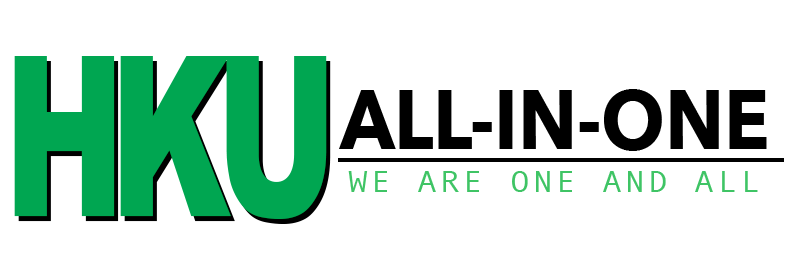
<style>
.page{position:relative;width:797px;height:271px;background:#ffffff}
.page>*{position:absolute;margin:0}
.t1{font:222.6px "Arial-Black";letter-spacing:-0.1em;color:#00a651;scale:0.65 1}
.t2{font:83px "AvenirNext-Bold";color:#000000;text-transform:uppercase;scale:0.9 1}
.t3{font:30px "AndaleMono";letter-spacing:0.1em;color:#3fc465;text-transform:uppercase;scale:1.1 1}
</style>
<div class="page">
<p class="t1" style="left:14px;top:56px;width:313px;height:163px">HKU</p>
<p class="t2" style="left:339px;top:89px;width:428px;height:62px">All-in-one</p>
<p class="t3" style="left:348px;top:171px;width:410px;height:21px">we are one and all</p>
</div>
